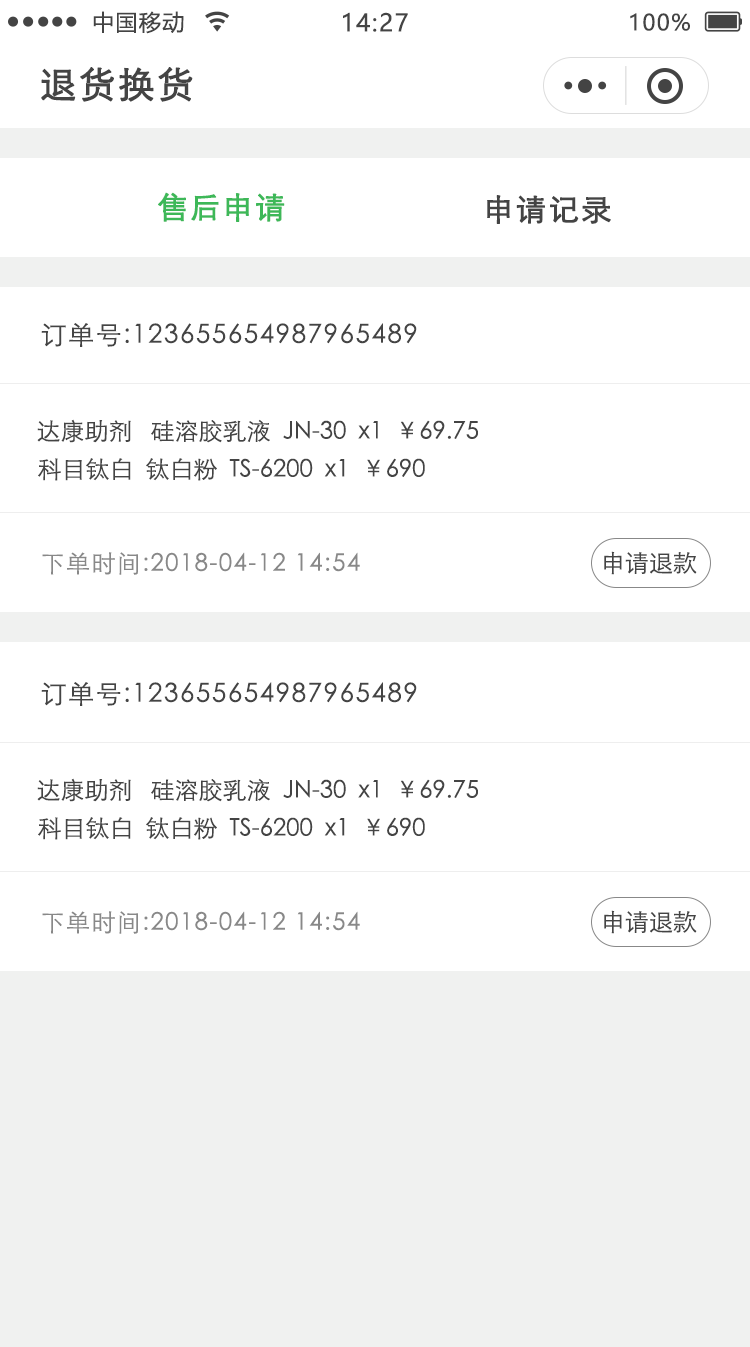
<style>
.page{position:relative;width:750px;height:1347px;background:#ffffff}
.page>*{position:absolute;margin:0}
.t1{font:22px "MicrosoftYaHei";letter-spacing:0.06em;color:#444444}
.t2{font:24px "MicrosoftYaHei";letter-spacing:0.06em;color:#444444}
.t3{font:36px "STXihei";letter-spacing:0.06em;color:#444444;font-weight:bold}
.t4{font:30px "STXihei";letter-spacing:0.06em;color:#3db858;font-weight:bold}
.t5{font:30px "STXihei";letter-spacing:0.06em;color:#444444;font-weight:bold}
.t6{font:26px "STXihei";letter-spacing:0.06em;color:#444444}
.t7{font:24px "STXihei";color:#444444}
.t8{font:24px "STXihei";letter-spacing:0.06em;color:#888888}
</style>
<div class="page">
<p class="t1" style="left:93px;top:11px;width:91px;height:23px">中国移动</p>
<p class="t2" style="left:343px;top:12px;width:65px;height:20px">14:27</p>
<p class="t1" style="left:630px;top:13px;width:60px;height:18px">100%</p>
<p class="t3" style="left:41px;top:67px;width:152px;height:35px">退货换货</p>
<p class="t4" style="left:158px;top:192px;width:127px;height:30px">售后申请</p>
<p class="t5" style="left:487px;top:195px;width:124px;height:29px">申请记录</p>
<p class="t6" style="left:41px;top:323px;width:376px;height:24px">订单号:123655654987965489</p>
<p class="t7" style="left:37px;top:419px;width:441px;height:24px">达康助剂   硅溶胶乳液  JN-30  x1  ￥69.75</p>
<p class="t7" style="left:38px;top:458px;width:387px;height:23px">科目钛白  钛白粉  TS-6200  x1  ￥690</p>
<p class="t8" style="left:42px;top:552px;width:318px;height:23px">下单时间:2018-04-12 14:54</p>
<p class="t7" style="left:604px;top:551px;width:93px;height:24px">申请退款</p>
<p class="t6" style="left:41px;top:682px;width:376px;height:24px">订单号:123655654987965489</p>
<p class="t7" style="left:37px;top:778px;width:441px;height:24px">达康助剂   硅溶胶乳液  JN-30  x1  ￥69.75</p>
<p class="t7" style="left:38px;top:817px;width:387px;height:23px">科目钛白  钛白粉  TS-6200  x1  ￥690</p>
<p class="t8" style="left:42px;top:911px;width:318px;height:23px">下单时间:2018-04-12 14:54</p>
<p class="t7" style="left:604px;top:910px;width:93px;height:24px">申请退款</p>
</div>
